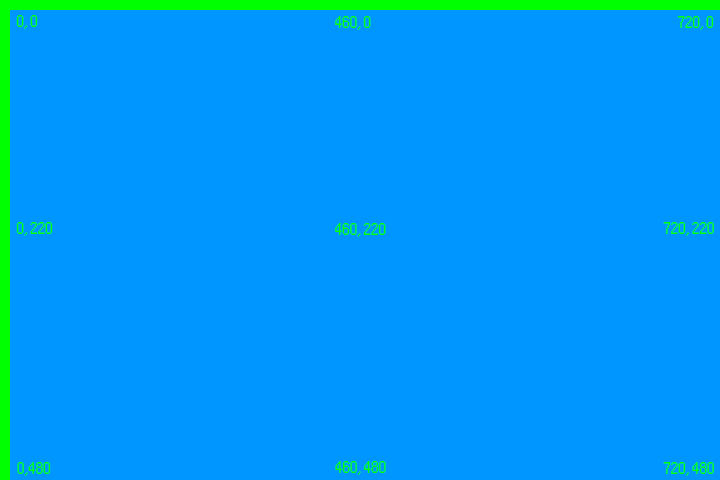
<style>
.page{position:relative;width:720px;height:480px;background:#0096ff}
.page>*{position:absolute;margin:0}
.t1{font:16px "Small Fonts";color:#00ff00}
</style>
<div class="page">
<p class="t1" style="left:16px;top:15px;width:22px;height:14px">0, 0</p>
<p class="t1" style="left:335px;top:16px;width:36px;height:14px">460, 0</p>
<p class="t1" style="left:677px;top:16px;width:37px;height:14px">720, 0</p>
<p class="t1" style="left:16px;top:222px;width:37px;height:14px">0, 220</p>
<p class="t1" style="left:663px;top:222px;width:51px;height:14px">720, 220</p>
<p class="t1" style="left:335px;top:223px;width:51px;height:14px">460, 220</p>
<p class="t1" style="left:17px;top:462px;width:34px;height:14px">0,480</p>
<p class="t1" style="left:335px;top:461px;width:51px;height:14px">460, 480</p>
<p class="t1" style="left:663px;top:462px;width:51px;height:14px">720, 480</p>
</div>
